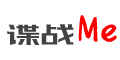
<style>
.page{position:relative;width:120px;height:60px;background:#ffffff}
.page>*{position:absolute;margin:0}
.t1{font:41px "Muyao-Softbrush";color:#ff0000}
.t2{font:34px "HuXiaoBoKuHei";color:#434341}
.t3{font:37px "AlibabaSans-LightItalic";color:#1a1a19}
</style>
<div class="page">
<p class="t1" style="left:78px;top:15px;width:39px;height:27px">Me</p>
<p class="t2" style="left:7px;top:24px;width:67px;height:22px"><span class="t3">谍</span>谍战</p>
</div>
